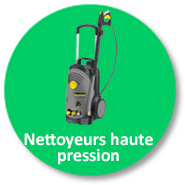
<style>
.page{position:relative;width:185px;height:185px;background:#00cc66}
.page>*{position:absolute;margin:0}
.t1{font:18px/16px "Calibri-Bold";color:#ffffff}
</style>
<div class="page">
<p class="t1" style="left:24px;top:132px;width:129px;height:33px;text-align:center">Nettoyeurs haute<br>pression</p>
</div>
